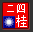
<style>
.page{position:relative;width:33px;height:32px;background:#f20000}
.page>*{position:absolute;margin:0}
.t1{font:10.4px "SimSun";color:#ffffff}
.t2{font:11.7px "SimSun";color:#ffffff}
</style>
<div class="page">
<p class="t1" style="left:7px;top:4px;width:18px;height:9px">二四</p>
<p class="t2" style="left:16px;top:15px;width:11px;height:12px">桂</p>
</div>
